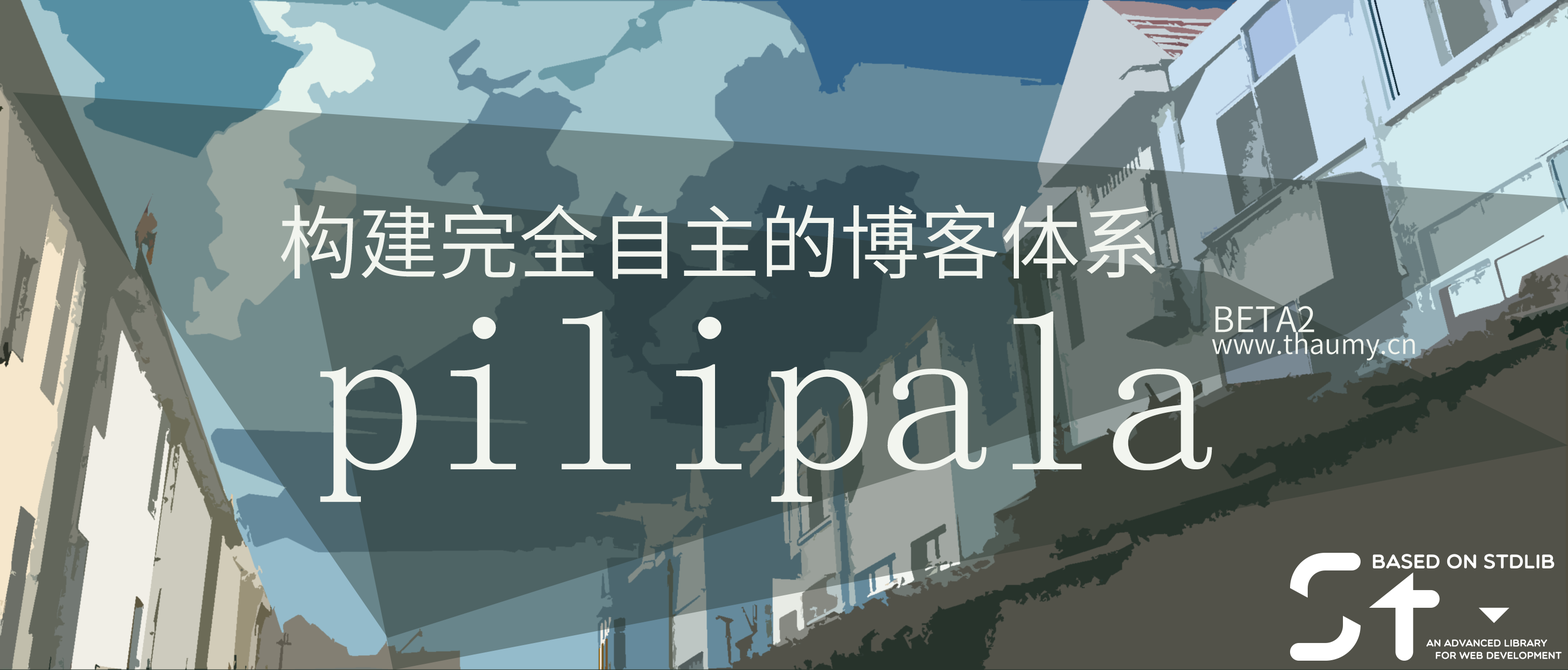
<style>
.page{position:relative;width:1568px;height:670px}
.page>*{position:absolute;margin:0}
.t1{font:80.3px "SourceHanSansCN-Normal";color:#f2f5ef}
.t2{font:34.9px "SourceHanSansCN-Normal";color:#f2f5ef}
.t3{font:225.5px "SimSun";color:#f2f5ef}
.t4{font:27.1px "SourceHanSansCN-Normal";color:#f2f5ef}
</style>
<div class="page">
<p class="t1" style="left:281px;top:204px;width:875px;height:75px">构建完全自主的博客体系</p>
<p class="t2" style="left:1215px;top:306px;width:99px;height:26px">BETA2</p>
<p class="t3" style="left:320px;top:311px;width:892px;height:191px">pilipala</p>
<p class="t4" style="left:1212px;top:332px;width:203px;height:28px">www.thaumy.cn</p>
</div>
